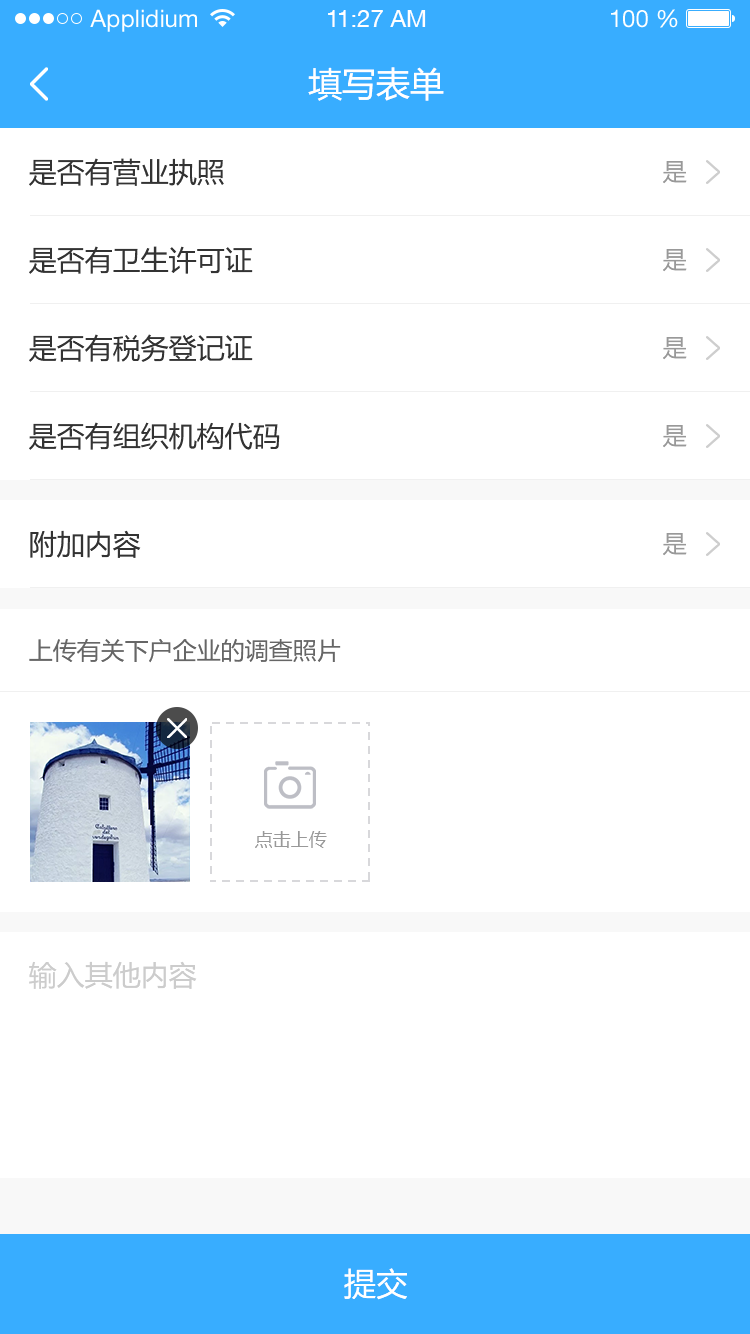
<style>
.page{position:relative;width:750px;height:1334px;background:#ffffff}
.page>*{position:absolute;margin:0}
.t1{font:24px "HelveticaNeueLTStd-Roman";color:#ffffff}
.t2{font:24px "HelveticaNeueCE-Roman";color:#ffffff}
.t3{font:34px "MicrosoftYaHei";color:#ffffff}
.t4{font:28px "MicrosoftYaHei";color:#333333}
.t5{font:24px "MicrosoftYaHei";color:#999999}
.t6{font:24px "MicrosoftYaHei";color:#666666}
.t7{font:18px "MicrosoftYaHei";color:#999999}
.t8{font:28px "MicrosoftYaHei";color:#cdcdcd}
.t9{font:32px "MicrosoftYaHei";color:#ffffff}
</style>
<div class="page">
<p class="t1" style="left:90px;top:9px;width:107px;height:23px">Applidium</p>
<p class="t2" style="left:328px;top:10px;width:98px;height:17px">11:27 AM</p>
<p class="t1" style="left:611px;top:9px;width:67px;height:19px">100 %</p>
<p class="t3" style="left:308px;top:67px;width:136px;height:34px">填写表单</p>
<p class="t4" style="left:29px;top:158px;width:195px;height:28px">是否有营业执照</p>
<p class="t5" style="left:663px;top:161px;width:24px;height:23px">是</p>
<p class="t4" style="left:29px;top:246px;width:224px;height:28px">是否有卫生许可证</p>
<p class="t5" style="left:663px;top:249px;width:24px;height:23px">是</p>
<p class="t4" style="left:29px;top:334px;width:224px;height:28px">是否有税务登记证</p>
<p class="t5" style="left:663px;top:337px;width:24px;height:23px">是</p>
<p class="t4" style="left:29px;top:422px;width:251px;height:28px">是否有组织机构代码</p>
<p class="t5" style="left:663px;top:425px;width:24px;height:23px">是</p>
<p class="t4" style="left:30px;top:530px;width:111px;height:28px">附加内容</p>
<p class="t5" style="left:663px;top:533px;width:24px;height:23px">是</p>
<p class="t6" style="left:29px;top:639px;width:312px;height:24px">上传有关下户企业的调查照片</p>
<p class="t7" style="left:255px;top:831px;width:72px;height:17px">点击上传</p>
<p class="t8" style="left:29px;top:961px;width:168px;height:28px">输入其他内容</p>
<p class="t9" style="left:344px;top:1268px;width:63px;height:32px">提交</p>
</div>
